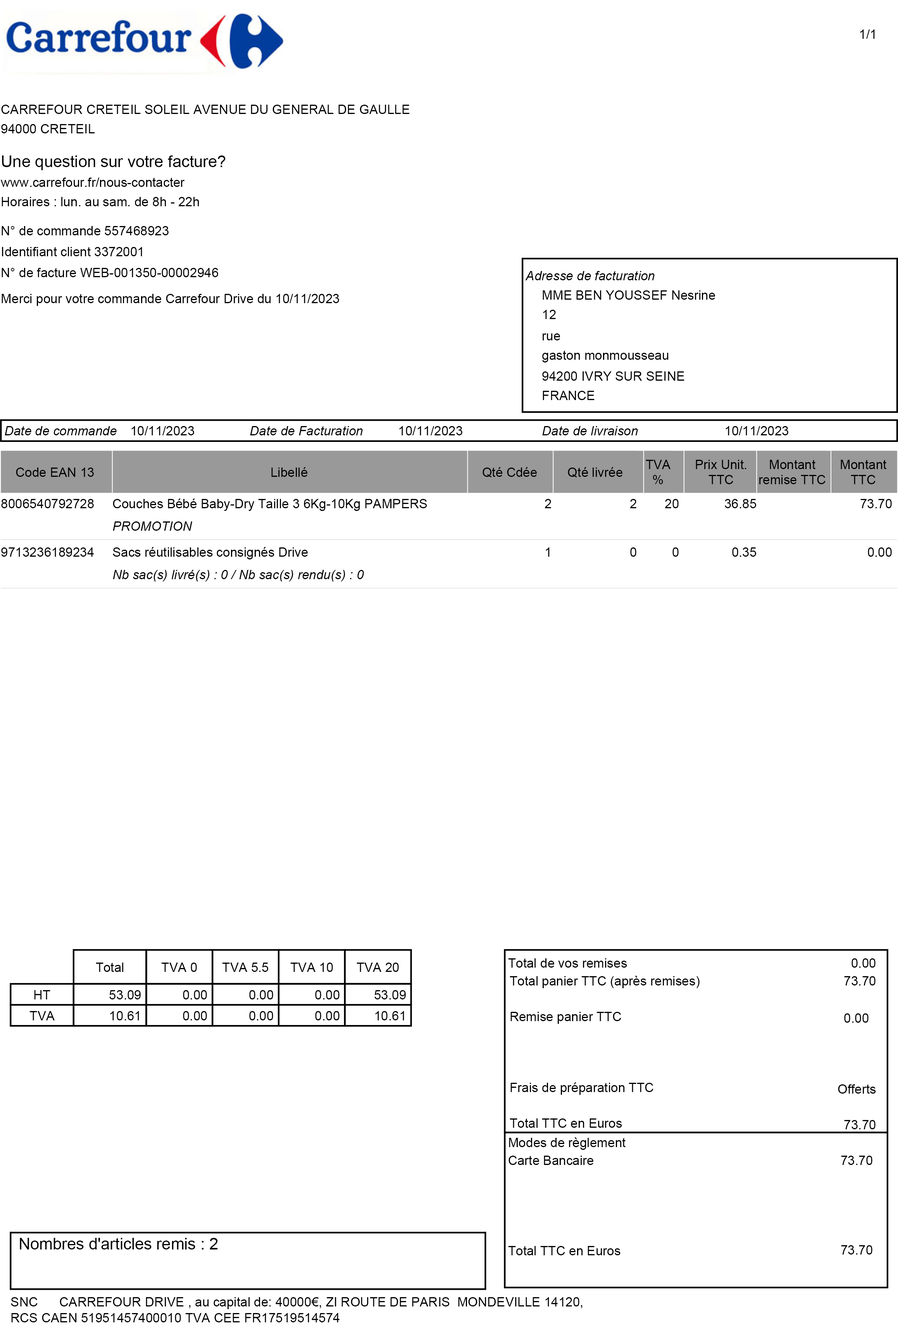
<style>
.page{position:relative;width:898px;height:1327px;background:#ffffff}
.page>*{position:absolute;margin:0}
.t1{font:12.9px "ArialMT";color:#000000}
.t2{font:16.2px "ArialMT";color:#000000}
.t3{font:12.9px "Arial-ItalicMT";color:#000000}
</style>
<div class="page">
<p class="t1" style="left:860px;top:29px;width:10px;height:10px">1/</p>
<p class="t1" style="left:871px;top:29px;width:4px;height:10px">1</p>
<p class="t1" style="left:1px;top:105px;width:409px;height:9px">CARREFOUR CRETEIL SOLEIL AVENUE DU GENERAL DE GAULLE</p>
<p class="t1" style="left:1px;top:124px;width:94px;height:9px">94000 CRETEIL</p>
<p class="t2" style="left:2px;top:155px;width:224px;height:15px">Une question sur votre facture?</p>
<p class="t1" style="left:1px;top:178px;width:184px;height:9px">www.carrefour.fr/nous-contacter</p>
<p class="t1" style="left:2px;top:197px;width:197px;height:9px">Horaires : lun. au sam. de 8h - 22h</p>
<p class="t1" style="left:2px;top:226px;width:167px;height:9px">N° de commande 557468923</p>
<p class="t1" style="left:2px;top:247px;width:140px;height:9px">Identifiant client 3372001</p>
<p class="t1" style="left:2px;top:268px;width:216px;height:9px">N° de facture WEB-001350-00002946</p>
<p class="t3" style="left:525px;top:271px;width:130px;height:9px">Adresse de facturation</p>
<p class="t1" style="left:2px;top:294px;width:337px;height:12px">Merci pour votre commande Carrefour Drive du 10/11/2023</p>
<p class="t1" style="left:543px;top:290px;width:172px;height:10px">MME BEN YOUSSEF Nesrine</p>
<p class="t1" style="left:543px;top:310px;width:13px;height:9px">12</p>
<p class="t1" style="left:543px;top:333px;width:17px;height:7px">rue</p>
<p class="t1" style="left:542px;top:351px;width:127px;height:12px">gaston monmousseau</p>
<p class="t1" style="left:542px;top:371px;width:143px;height:10px">94200 IVRY SUR SEINE</p>
<p class="t1" style="left:543px;top:391px;width:52px;height:9px">FRANCE</p>
<p class="t3" style="left:5px;top:426px;width:112px;height:9px">Date de commande</p>
<p class="t1" style="left:131px;top:426px;width:63px;height:9px">10/11/2023</p>
<p class="t3" style="left:250px;top:426px;width:113px;height:9px">Date de Facturation</p>
<p class="t1" style="left:399px;top:426px;width:64px;height:9px">10/11/2023</p>
<p class="t3" style="left:542px;top:426px;width:96px;height:9px">Date de livraison</p>
<p class="t1" style="left:726px;top:426px;width:63px;height:9px">10/11/2023</p>
<p class="t1" style="left:646px;top:460px;width:25px;height:9px">TVA</p>
<p class="t1" style="left:696px;top:460px;width:51px;height:9px">Prix Unit.</p>
<p class="t1" style="left:770px;top:460px;width:46px;height:9px">Montant</p>
<p class="t1" style="left:841px;top:460px;width:46px;height:9px">Montant</p>
<p class="t1" style="left:16px;top:468px;width:78px;height:9px">Code EAN 13</p>
<p class="t1" style="left:271px;top:467px;width:37px;height:10px">Libellé</p>
<p class="t1" style="left:483px;top:467px;width:54px;height:11px">Qté Cdée</p>
<p class="t1" style="left:568px;top:467px;width:55px;height:11px">Qté livrée</p>
<p class="t1" style="left:653px;top:475px;width:10px;height:9px">%</p>
<p class="t1" style="left:709px;top:475px;width:25px;height:9px">TTC</p>
<p class="t1" style="left:760px;top:475px;width:66px;height:9px">remise TTC</p>
<p class="t1" style="left:851px;top:475px;width:25px;height:9px">TTC</p>
<p class="t1" style="left:1px;top:499px;width:93px;height:9px">8006540792728</p>
<p class="t1" style="left:113px;top:499px;width:314px;height:12px">Couches Bébé Baby-Dry Taille 3 6Kg-10Kg PAMPERS</p>
<p class="t1" style="left:545px;top:499px;width:6px;height:9px">2</p>
<p class="t1" style="left:630px;top:499px;width:7px;height:9px">2</p>
<p class="t1" style="left:665px;top:499px;width:14px;height:9px">20</p>
<p class="t1" style="left:725px;top:499px;width:31px;height:9px">36.85</p>
<p class="t1" style="left:861px;top:499px;width:31px;height:9px">73.70</p>
<p class="t3" style="left:113px;top:522px;width:79px;height:9px">PROMOTION</p>
<p class="t1" style="left:1px;top:548px;width:93px;height:9px">9713236189234</p>
<p class="t1" style="left:113px;top:547px;width:195px;height:13px">Sacs réutilisables consignés Drive</p>
<p class="t1" style="left:546px;top:548px;width:4px;height:9px">1</p>
<p class="t1" style="left:630px;top:548px;width:7px;height:9px">0</p>
<p class="t1" style="left:673px;top:548px;width:6px;height:9px">0</p>
<p class="t1" style="left:732px;top:548px;width:24px;height:9px">0.35</p>
<p class="t1" style="left:868px;top:548px;width:24px;height:9px">0.00</p>
<p class="t3" style="left:113px;top:570px;width:251px;height:12px">Nb sac(s) livré(s) : 0 / Nb sac(s) rendu(s) : 0</p>
<p class="t1" style="left:96px;top:963px;width:27px;height:9px">Total</p>
<p class="t1" style="left:161px;top:963px;width:36px;height:9px">TVA 0</p>
<p class="t1" style="left:222px;top:963px;width:46px;height:9px">TVA 5.5</p>
<p class="t1" style="left:290px;top:963px;width:43px;height:9px">TVA 10</p>
<p class="t1" style="left:357px;top:963px;width:42px;height:9px">TVA 20</p>
<p class="t1" style="left:508px;top:959px;width:119px;height:9px">Total de vos remises</p>
<p class="t1" style="left:852px;top:959px;width:24px;height:9px">0.00</p>
<p class="t1" style="left:510px;top:976px;width:190px;height:12px">Total panier TTC (après remises)</p>
<p class="t1" style="left:845px;top:976px;width:31px;height:10px">73.70</p>
<p class="t1" style="left:34px;top:990px;width:16px;height:10px">HT</p>
<p class="t1" style="left:109px;top:990px;width:32px;height:10px">53.09</p>
<p class="t1" style="left:183px;top:990px;width:24px;height:10px">0.00</p>
<p class="t1" style="left:249px;top:990px;width:24px;height:10px">0.00</p>
<p class="t1" style="left:315px;top:990px;width:25px;height:10px">0.00</p>
<p class="t1" style="left:375px;top:990px;width:31px;height:10px">53.09</p>
<p class="t1" style="left:29px;top:1011px;width:26px;height:10px">TVA</p>
<p class="t1" style="left:110px;top:1011px;width:29px;height:10px">10.61</p>
<p class="t1" style="left:183px;top:1011px;width:24px;height:10px">0.00</p>
<p class="t1" style="left:249px;top:1011px;width:24px;height:10px">0.00</p>
<p class="t1" style="left:315px;top:1011px;width:25px;height:10px">0.00</p>
<p class="t1" style="left:375px;top:1011px;width:29px;height:10px">10.61</p>
<p class="t1" style="left:511px;top:1012px;width:111px;height:12px">Remise panier TTC</p>
<p class="t1" style="left:845px;top:1014px;width:24px;height:9px">0.00</p>
<p class="t1" style="left:511px;top:1083px;width:143px;height:12px">Frais de préparation TTC</p>
<p class="t1" style="left:838px;top:1085px;width:38px;height:9px">Offerts</p>
<p class="t1" style="left:510px;top:1119px;width:112px;height:9px">Total TTC en Euros</p>
<p class="t1" style="left:845px;top:1120px;width:31px;height:10px">73.70</p>
<p class="t1" style="left:509px;top:1138px;width:117px;height:12px">Modes de règlement</p>
<p class="t1" style="left:509px;top:1156px;width:85px;height:9px">Carte Bancaire</p>
<p class="t1" style="left:841px;top:1156px;width:32px;height:9px">73.70</p>
<p class="t2" style="left:20px;top:1238px;width:198px;height:12px">Nombres d'articles remis : 2</p>
<p class="t1" style="left:508px;top:1246px;width:113px;height:10px">Total TTC en Euros</p>
<p class="t1" style="left:841px;top:1245px;width:32px;height:10px">73.70</p>
<p class="t1" style="left:11px;top:1297px;width:572px;height:12px">SNC      CARREFOUR DRIVE , au capital de: 40000€, ZI ROUTE DE PARIS  MONDEVILLE 14120,</p>
<p class="t1" style="left:11px;top:1313px;width:329px;height:10px">RCS CAEN 51951457400010 TVA CEE FR17519514574</p>
</div>
